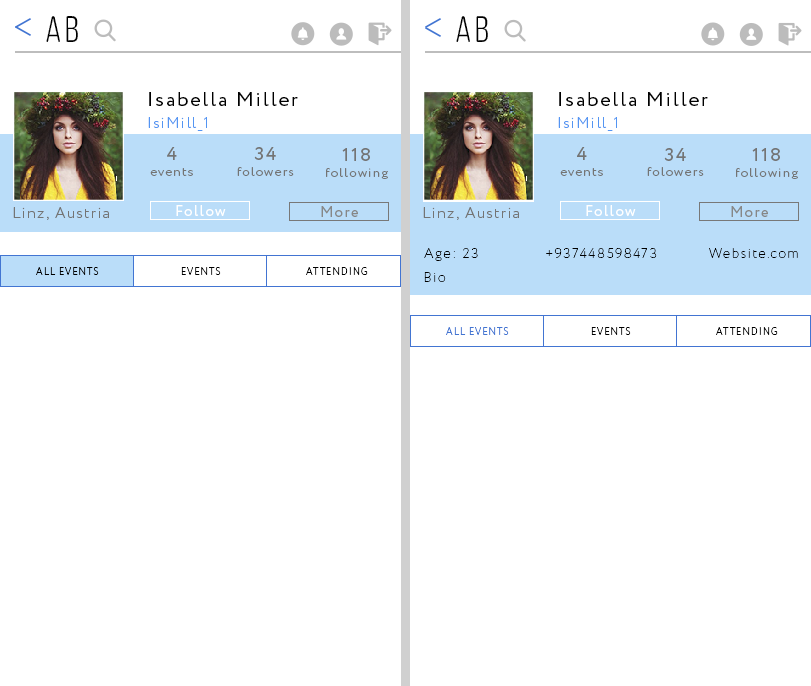
<style>
.page{position:relative;width:811px;height:686px;background:#ffffff}
.page>*{position:absolute;margin:0}
.t1{font:37px "ClutchSans-Regular";letter-spacing:0.1em;color:#000000}
.t2{font:36.9px "ClutchSans-Regular";letter-spacing:0.1em;color:#000000}
.t3{font:20px "Circe-Regular";letter-spacing:0.1em;color:#000000}
.t4{font:15px "Circe-Light";letter-spacing:0.1em;color:#5495f2}
.t5{font:13px "Circe-Light";letter-spacing:0.1em;color:#747474}
.t6{font:18.6px "Circe-Regular";letter-spacing:0.1em;color:#747474}
.t7{font:15px "Circe-Light";letter-spacing:0.1em;color:#747474}
.t8{font:14.7px "Circe-Regular";letter-spacing:0.1em;color:#ffffff}
.t9{font:14.7px "Circe-Regular";letter-spacing:0.1em;color:#878787}
.t10{font:13.7px "Circe-ExtraLight";letter-spacing:0.1em;color:#000000}
.t11{font:10.2px "Circe-Light";letter-spacing:0.1em;color:#000000;scale:0.92 1}
.t12{font:10.2px "Circe-Light";letter-spacing:0.1em;color:#4275d2;scale:0.92 1}
</style>
<div class="page">
<p class="t1" style="left:46px;top:16px;width:32px;height:26px">Ab</p>
<p class="t2" style="left:456px;top:16px;width:32px;height:26px">Ab</p>
<p class="t3" style="left:149px;top:92px;width:149px;height:14px">Isabella Miller</p>
<p class="t3" style="left:559px;top:92px;width:149px;height:14px">Isabella Miller</p>
<p class="t4" style="left:148px;top:117px;width:59px;height:14px">IsiMill_1</p>
<p class="t4" style="left:558px;top:117px;width:59px;height:14px">IsiMill_1</p>
<p class="t5" style="left:150px;top:147px;width:43px;height:29px;text-align:center"><span class="t6">4<br></span>events</p>
<p class="t5" style="left:237px;top:147px;width:57px;height:29px;text-align:center"><span class="t6">34<br></span>folowers</p>
<p class="t5" style="left:326px;top:148px;width:62px;height:31px;text-align:center"><span class="t6">118<br></span>following</p>
<p class="t5" style="left:560px;top:147px;width:43px;height:29px;text-align:center"><span class="t6">4<br></span>events</p>
<p class="t5" style="left:647px;top:148px;width:57px;height:28px;text-align:center"><span class="t6">34<br></span>folowers</p>
<p class="t5" style="left:736px;top:148px;width:62px;height:31px;text-align:center"><span class="t6">118<br></span>following</p>
<p class="t7" style="left:13px;top:207px;width:96px;height:13px">Linz, Austria</p>
<p class="t8" style="left:176px;top:205px;width:50px;height:11px">Follow</p>
<p class="t9" style="left:321px;top:206px;width:37px;height:11px">More</p>
<p class="t7" style="left:423px;top:207px;width:96px;height:13px">Linz, Austria</p>
<p class="t8" style="left:586px;top:205px;width:50px;height:11px">Follow</p>
<p class="t9" style="left:731px;top:206px;width:37px;height:11px">More</p>
<p class="t10" style="left:424px;top:248px;width:54px;height:13px">Age: 23</p>
<p class="t10" style="left:546px;top:248px;width:111px;height:10px">+937448598473</p>
<p class="t10" style="left:709px;top:248px;width:89px;height:10px">Website.com</p>
<p class="t11" style="left:36px;top:267px;width:63px;height:8px">ALL EVENTS</p>
<p class="t11" style="left:181px;top:267px;width:40px;height:8px">EVENTS</p>
<p class="t11" style="left:306px;top:267px;width:62px;height:8px">ATTENDING</p>
<p class="t10" style="left:424px;top:272px;width:22px;height:10px">Bio</p>
<p class="t12" style="left:446px;top:327px;width:63px;height:8px">ALL EVENTS</p>
<p class="t11" style="left:591px;top:327px;width:40px;height:8px">EVENTS</p>
<p class="t11" style="left:716px;top:327px;width:62px;height:8px">ATTENDING</p>
</div>
